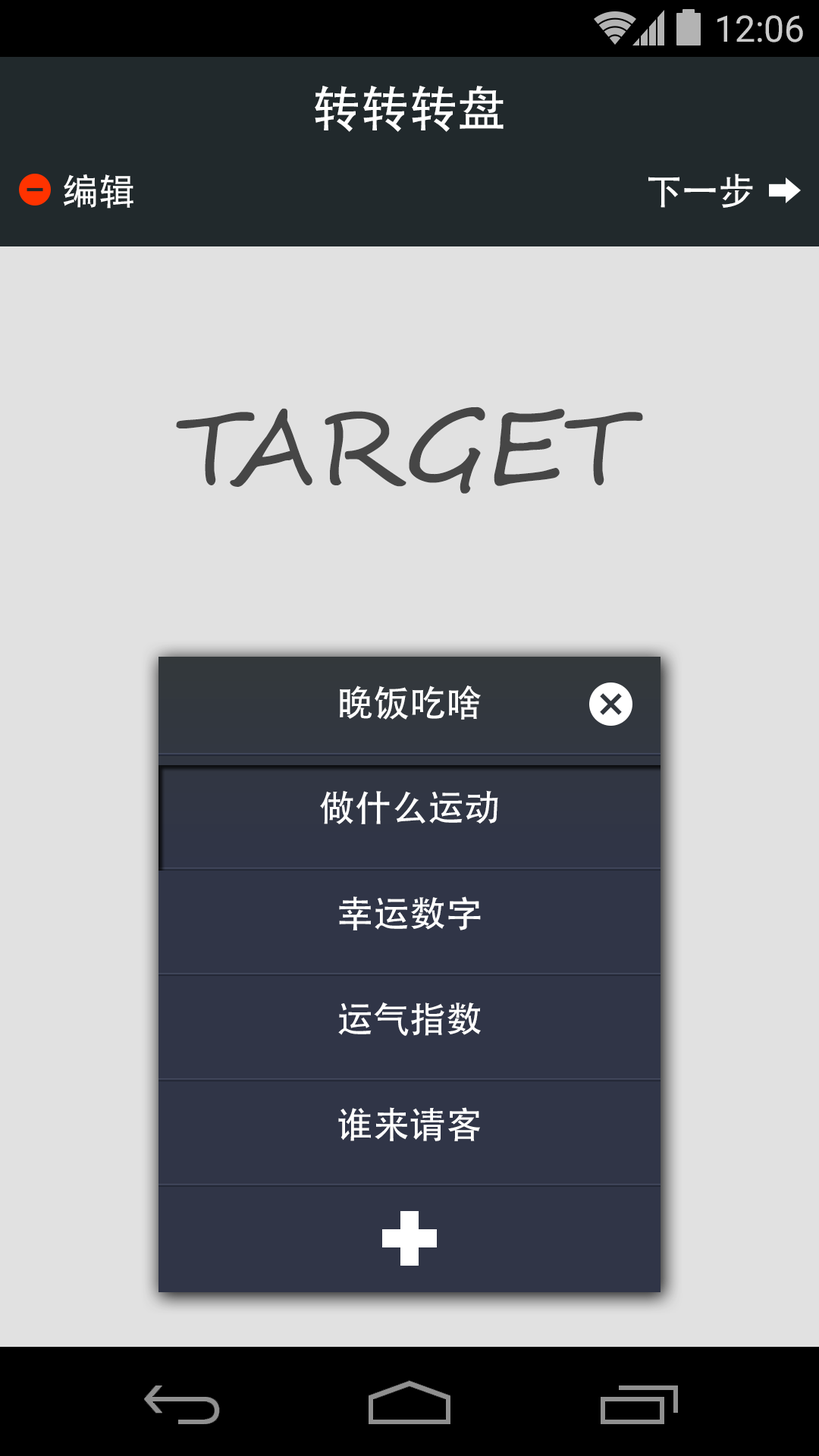
<style>
.page{position:relative;width:819px;height:1456px;background:#e1e1e1}
.page>*{position:absolute;margin:0}
.t1{font:36.4px "Roboto-Regular";color:#cbcbcb}
.t2{font:48.5px "AdobeHeitiStd-Regular";color:#ffffff}
.t3{font:36.4px "AdobeHeitiStd-Regular";color:#ffffff}
.t4{font:102.4px "SegoeScript";color:#464646}
</style>
<div class="page">
<p class="t1" style="left:717px;top:15px;width:86px;height:27px">12:06</p>
<p class="t2" style="left:315px;top:86px;width:189px;height:46px">转转转盘</p>
<p class="t3" style="left:63px;top:174px;width:70px;height:35px">编辑</p>
<p class="t3" style="left:648px;top:174px;width:105px;height:34px">下一步</p>
<p class="t4" style="left:176px;top:406px;width:467px;height:88px">TARGET</p>
<p class="t3" style="left:340px;top:686px;width:141px;height:34px">晚饭吃啥</p>
<p class="t3" style="left:320px;top:790px;width:178px;height:34px">做什么运动</p>
<p class="t3" style="left:339px;top:896px;width:142px;height:34px">幸运数字</p>
<p class="t3" style="left:338px;top:1002px;width:143px;height:34px">运气指数</p>
<p class="t3" style="left:338px;top:1107px;width:142px;height:34px">谁来请客</p>
</div>
